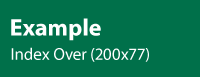
<style>
.page{position:relative;width:200px;height:77px;background:#00704a}
.page>*{position:absolute;margin:0}
.t1{font:24px "MyriadPro-Bold";color:#ffffff}
.t2{font:17px "MyriadPro-Regular";color:#ffffff}
</style>
<div class="page">
<p class="t1" style="left:11px;top:18px;width:90px;height:23px">Example</p>
<p class="t2" style="left:11px;top:47px;width:138px;height:15px">Index Over (200x77)</p>
</div>
